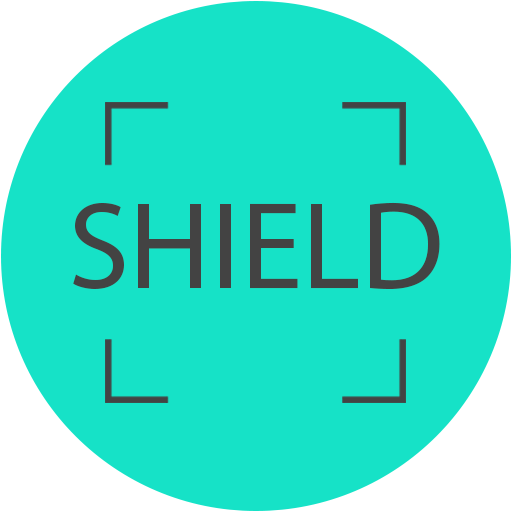
<style>
.page{position:relative;width:512px;height:512px;background:#16e2c7}
.page>*{position:absolute;margin:0}
.t1{font:125px "MyriadPro-Regular";color:#434343}
</style>
<div class="page">
<p class="t1" style="left:73px;top:202px;width:367px;height:87px">SHIELD</p>
</div>
